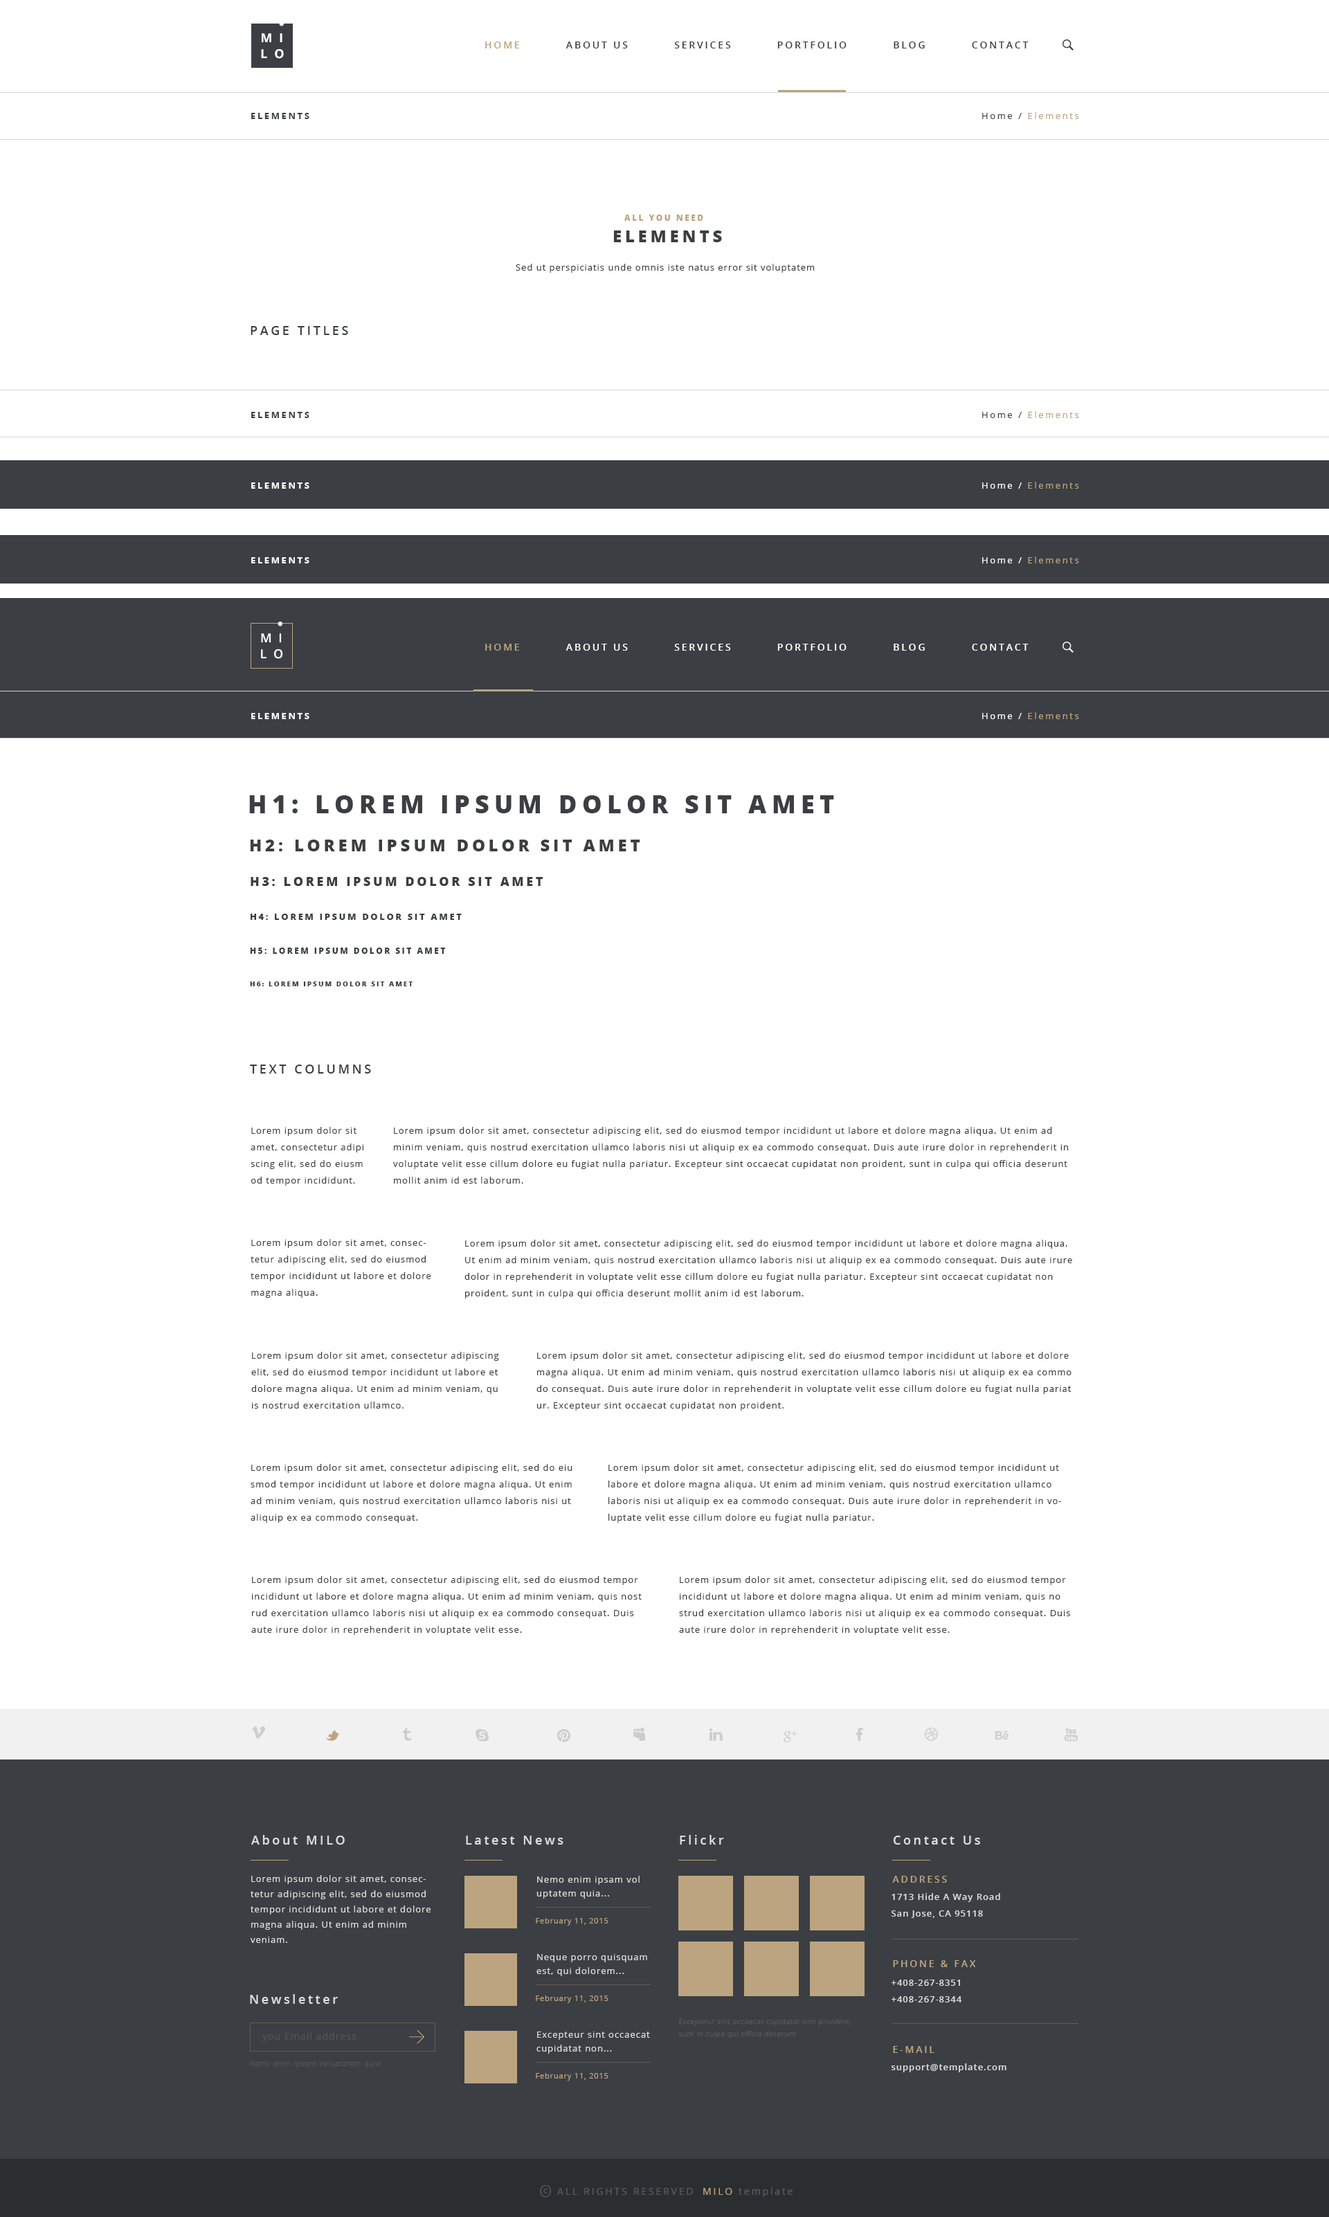
<style>
.page{position:relative;width:1329px;height:2217px;background:#ffffff}
.page>*{position:absolute;margin:0}
.t1{font:12.5px "OpenSans-Bold";letter-spacing:0.55em;color:#ffffff;text-transform:uppercase}
.t2{font:9.7px "OpenSans-Semibold";letter-spacing:0.2em;color:#3b3e43;text-transform:uppercase}
.t3{font:9.7px "OpenSans-Semibold";letter-spacing:0.2em;color:#bca480;text-transform:uppercase}
.t4{font:9px "OpenSans-Bold";letter-spacing:0.2em;color:#3b3e43;text-transform:uppercase}
.t5{font:9px "OpenSans";letter-spacing:0.2em;color:#bca480}
.t6{font:9px "OpenSans";letter-spacing:0.2em;color:#3b3e43}
.t7{font:8.3px "OpenSans-Extrabold";letter-spacing:0.2em;color:#bca480;text-transform:uppercase}
.t8{font:16.6px "OpenSans-Extrabold";letter-spacing:0.2em;color:#3b3e43;text-transform:uppercase}
.t9{font:9px "OpenSans";letter-spacing:0.075em;color:#3b3e43}
.t10{font:12.5px "OpenSans-Semibold";letter-spacing:0.2em;color:#3b3e43;text-transform:uppercase}
.t11{font:9px "OpenSans-Bold";letter-spacing:0.2em;color:#ffffff;text-transform:uppercase}
.t12{font:9px "OpenSans";letter-spacing:0.2em;color:#ffffff}
.t13{font:12.5px "OpenSans-Semibold";letter-spacing:0.55em;color:#ffffff;text-transform:uppercase}
.t14{font:9.7px "OpenSans-Semibold";letter-spacing:0.2em;color:#ffffff;text-transform:uppercase}
.t15{font:24.9px "OpenSans-Extrabold";letter-spacing:0.2em;color:#3b3e43;text-transform:uppercase}
.t16{font:12.5px "OpenSans-Extrabold";letter-spacing:0.2em;color:#3b3e43;text-transform:uppercase}
.t17{font:9px "OpenSans-Extrabold";letter-spacing:0.2em;color:#3b3e43;text-transform:uppercase}
.t18{font:8.3px "OpenSans-Extrabold";letter-spacing:0.2em;color:#3b3e43;text-transform:uppercase}
.t19{font:6.9px "OpenSans-Extrabold";letter-spacing:0.2em;color:#3b3e43;text-transform:uppercase}
.t20{font:9px/16.6px "OpenSans";letter-spacing:0.075em;color:#3b3e43}
.t21{font:12.5px "OpenSans-Semibold";letter-spacing:0.2em;color:#dddddd}
.t22{font:9px/15.2px "OpenSans";letter-spacing:0.075em;color:#dddddd}
.t23{font:9px/13.8px "OpenSans";letter-spacing:0.075em;color:#dddddd}
.t24{font:9px/16.6px "OpenSans-Semibold";letter-spacing:0.075em;color:#dddddd}
.t25{font:7.6px "OpenSans";letter-spacing:0.075em;color:#bca480}
.t26{font:6.9px/12.5px "OpenSans-Light";letter-spacing:0.075em;color:#585c62;font-style:italic}
.t27{font:9.7px "OpenSans";letter-spacing:0.075em;color:#505459}
.t28{font:7.6px "OpenSansLight-Italic";letter-spacing:0.075em;color:#53575d}
.t29{font:9px "OpenSans-Semibold";letter-spacing:0.075em;color:#dddddd}
.t30{font:16.6px "OpenSans-Light";letter-spacing:0.2em;color:#585c62;text-transform:uppercase}
.t31{font:6.9px "OpenSans";letter-spacing:0.2em;color:#585c62;text-transform:uppercase}
.t32{font:9.7px "OpenSans";letter-spacing:0.2em;color:#585c62;text-transform:uppercase}
.t33{font:9.7px "OpenSans";letter-spacing:0.2em;color:#585c62}
.t34{font:9.7px "OpenSans";letter-spacing:0.2em;color:#bca480;text-transform:uppercase}
</style>
<div class="page">
<p class="t1" style="left:262px;top:33px;width:20px;height:9px">mi</p>
<p class="t2" style="left:485px;top:42px;width:544px;height:6px"><span class="t3">Home          </span>About Us          Services          Portfolio          Blog          Contact</p>
<p class="t1" style="left:261px;top:49px;width:23px;height:10px">lo</p>
<p class="t4" style="left:251px;top:113px;width:58px;height:6px">elements</p>
<p class="t5" style="left:982px;top:112px;width:97px;height:7px"><span class="t6">Home / </span>Elements</p>
<p class="t7" style="left:624px;top:215px;width:79px;height:6px">all you need</p>
<p class="t8" style="left:613px;top:231px;width:109px;height:11px">Elements</p>
<p class="t9" style="left:516px;top:264px;width:299px;height:9px">Sed ut perspiciatis unde omnis iste natus error sit voluptatem</p>
<p class="t10" style="left:251px;top:326px;width:97px;height:9px">Page titles</p>
<p class="t4" style="left:251px;top:412px;width:58px;height:6px">elements</p>
<p class="t5" style="left:982px;top:411px;width:97px;height:7px"><span class="t6">Home / </span>Elements</p>
<p class="t11" style="left:251px;top:483px;width:58px;height:6px">elements</p>
<p class="t5" style="left:982px;top:482px;width:97px;height:7px"><span class="t12">Home / </span>Elements</p>
<p class="t11" style="left:251px;top:557px;width:58px;height:7px">elements</p>
<p class="t5" style="left:982px;top:557px;width:97px;height:7px"><span class="t12">Home / </span>Elements</p>
<p class="t13" style="left:261px;top:633px;width:21px;height:10px">mi</p>
<p class="t13" style="left:261px;top:649px;width:22px;height:10px">lo</p>
<p class="t14" style="left:485px;top:644px;width:544px;height:7px"><span class="t3">Home</span>          About Us          Services          Portfolio          Blog          Contact</p>
<p class="t11" style="left:251px;top:713px;width:58px;height:6px">elements</p>
<p class="t5" style="left:982px;top:712px;width:97px;height:7px"><span class="t12">Home / </span>Elements</p>
<p class="t15" style="left:249px;top:795px;width:585px;height:18px">H1: Lorem ipsum dolor sit amet</p>
<p class="t8" style="left:250px;top:840px;width:390px;height:12px">H2: Lorem ipsum dolor sit amet</p>
<p class="t16" style="left:251px;top:877px;width:292px;height:9px">H3: Lorem ipsum dolor sit amet</p>
<p class="t17" style="left:251px;top:914px;width:211px;height:6px">H4: Lorem ipsum dolor sit amet</p>
<p class="t18" style="left:250px;top:948px;width:195px;height:6px">H5: Lorem ipsum dolor sit amet</p>
<p class="t19" style="left:250px;top:982px;width:163px;height:5px">H6: Lorem ipsum dolor sit amet</p>
<p class="t10" style="left:250px;top:1065px;width:121px;height:9px">text columns</p>
<p class="t20" style="left:251px;top:1127px;width:113px;height:59px">Lorem ipsum dolor sit amet, consectetur adipi<br>scing elit, sed do eiusm od tempor incididunt.</p>
<p class="t20" style="left:393px;top:1127px;width:676px;height:57px">Lorem ipsum dolor sit amet, consectetur adipiscing elit, sed do eiusmod tempor incididunt ut labore et dolore magna aliqua. Ut enim ad minim veniam, quis nostrud exercitation ullamco laboris nisi ut aliquip ex ea commodo consequat. Duis aute irure dolor in reprehenderit in voluptate velit esse cillum dolore eu fugiat nulla pariatur. Excepteur sint occaecat cupidatat non proident, sunt in culpa qui officia deserunt mollit anim id est laborum.</p>
<p class="t20" style="left:251px;top:1239px;width:180px;height:59px">Lorem ipsum dolor sit amet, consectetur adipiscing elit, sed do eiusmod tempor incididunt ut labore et dolore magna aliqua.</p>
<p class="t20" style="left:465px;top:1240px;width:607px;height:59px">Lorem ipsum dolor sit amet, consectetur adipiscing elit, sed do eiusmod tempor incididunt ut labore et dolore magna aliqua. Ut enim ad minim veniam, quis nostrud exercitation ullamco laboris nisi ut aliquip ex ea commodo consequat. Duis aute irure dolor in reprehenderit in voluptate velit esse cillum dolore eu fugiat nulla pariatur. Excepteur sint occaecat cupidatat non proident, sunt in culpa qui officia deserunt mollit anim id est laborum.</p>
<p class="t20" style="left:251px;top:1352px;width:248px;height:57px">Lorem ipsum dolor sit amet, consectetur adipiscing elit, sed do eiusmod tempor incididunt ut labore et dolore magna aliqua. Ut enim ad minim veniam, qu is nostrud exercitation ullamco.</p>
<p class="t20" style="left:537px;top:1352px;width:535px;height:59px">Lorem ipsum dolor sit amet, consectetur adipiscing elit, sed do eiusmod tempor incididunt ut labore et dolore magna aliqua. Ut enim ad minim veniam, quis nostrud exercitation ullamco laboris nisi ut aliquip ex ea commo do consequat. Duis aute irure dolor in reprehenderit in voluptate velit esse cillum dolore eu fugiat nulla pariat ur. Excepteur sint occaecat cupidatat non proident.</p>
<p class="t20" style="left:251px;top:1464px;width:322px;height:59px">Lorem ipsum dolor sit amet, consectetur adipiscing elit, sed do eiu smod tempor incididunt ut labore et dolore magna aliqua. Ut enim ad minim veniam, quis nostrud exercitation ullamco laboris nisi ut aliquip ex ea commodo consequat.</p>
<p class="t20" style="left:609px;top:1464px;width:452px;height:59px">Lorem ipsum dolor sit amet, consectetur adipiscing elit, sed do eiusmod tempor incididunt ut labore et dolore magna aliqua. Ut enim ad minim veniam, quis nostrud exercitation ullamco laboris nisi ut aliquip ex ea commodo consequat. Duis aute irure dolor in reprehenderit in voluptate velit esse cillum dolore eu fugiat nulla pariatur.</p>
<p class="t20" style="left:251px;top:1576px;width:391px;height:59px">Lorem ipsum dolor sit amet, consectetur adipiscing elit, sed do eiusmod tempor incididunt ut labore et dolore magna aliqua. Ut enim ad minim veniam, quis nost rud exercitation ullamco laboris nisi ut aliquip ex ea commodo consequat. Duis aute irure dolor in reprehenderit in voluptate velit esse.</p>
<p class="t20" style="left:679px;top:1576px;width:391px;height:59px">Lorem ipsum dolor sit amet, consectetur adipiscing elit, sed do eiusmod tempor incididunt ut labore et dolore magna aliqua. Ut enim ad minim veniam, quis no strud exercitation ullamco laboris nisi ut aliquip ex ea commodo consequat. Duis aute irure dolor in reprehenderit in voluptate velit esse.</p>
<p class="t21" style="left:251px;top:1835px;width:94px;height:10px">About MILO</p>
<p class="t21" style="left:466px;top:1836px;width:98px;height:9px">Latest News</p>
<p class="t21" style="left:680px;top:1835px;width:44px;height:10px">Flickr</p>
<p class="t21" style="left:893px;top:1836px;width:87px;height:9px">Contact Us</p>
<p class="t22" style="left:251px;top:1875px;width:180px;height:68px">Lorem ipsum dolor sit amet, consectetur adipiscing elit, sed do eiusmod tempor incididunt ut labore et dolore magna aliqua. Ut enim ad minim veniam.</p>
<p class="t23" style="left:537px;top:1876px;width:103px;height:23px">Nemo enim ipsam vol uptatem quia...</p>
<p class="t3" style="left:892px;top:1876px;width:55px;height:7px">Address</p>
<p class="t24" style="left:892px;top:1893px;width:108px;height:25px">1713 Hide A Way Road<br>San Jose, CA 95118</p>
<p class="t25" style="left:536px;top:1918px;width:73px;height:8px">February 11, 2015</p>
<p class="t23" style="left:537px;top:1954px;width:110px;height:23px">Neque porro quisquam est, qui dolorem...</p>
<p class="t3" style="left:893px;top:1961px;width:83px;height:7px">Phone &amp; Fax</p>
<p class="t24" style="left:892px;top:1980px;width:70px;height:23px">+408-267-8351<br>+408-267-8344</p>
<p class="t21" style="left:250px;top:1995px;width:88px;height:9px">Newsletter</p>
<p class="t25" style="left:536px;top:1996px;width:73px;height:8px">February 11, 2015</p>
<p class="t26" style="left:678px;top:2019px;width:173px;height:20px">Excepteur sint occaecat cupidatat non proident, sunt in culpa qui officia deserunt</p>
<p class="t27" style="left:262px;top:2033px;width:95px;height:9px">you Email address</p>
<p class="t23" style="left:537px;top:2032px;width:113px;height:22px">Excepteur sint occaecat cupidatat non...</p>
<p class="t3" style="left:893px;top:2046px;width:42px;height:7px">E-mail</p>
<p class="t28" style="left:249px;top:2061px;width:132px;height:8px">Nemo enim ipsam voluptatem quia</p>
<p class="t29" style="left:892px;top:2064px;width:115px;height:9px">support@template.com</p>
<p class="t25" style="left:536px;top:2073px;width:73px;height:8px">February 11, 2015</p>
<p class="t30" style="left:540px;top:2186px;width:11px;height:11px">O</p>
<p class="t31" style="left:543px;top:2189px;width:5px;height:5px">c</p>
<p class="t32" style="left:557px;top:2188px;width:136px;height:7px">All Rights Reserved</p>
<p class="t33" style="left:703px;top:2188px;width:90px;height:9px"><span class="t34">MILO </span>template</p>
</div>
